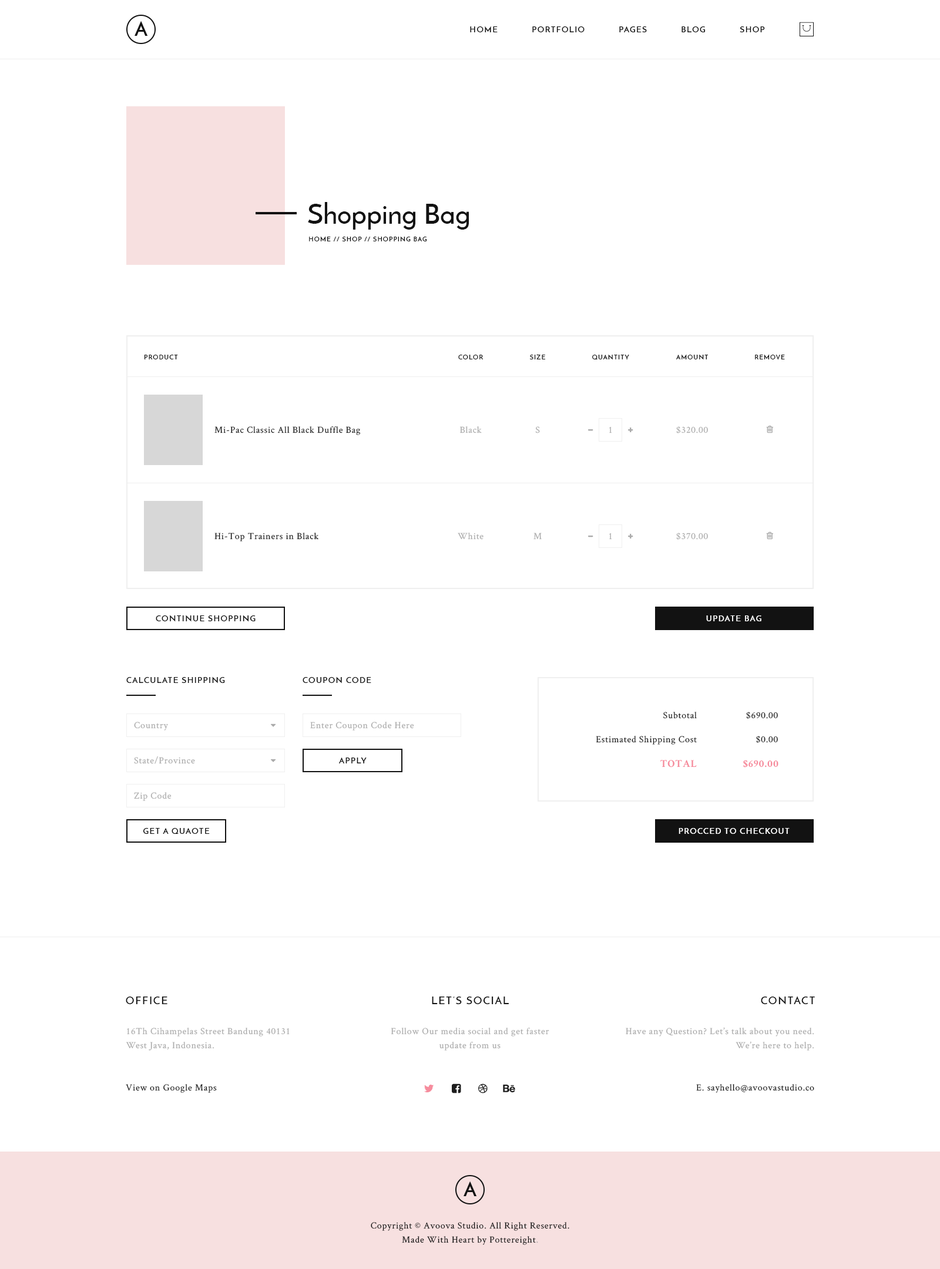
<style>
.page{position:relative;width:940px;height:1269px;background:#ffffff}
.page>*{position:absolute;margin:0}
.t1{font:20px "JosefinSans-Bold";letter-spacing:0.5em;color:#121212;text-transform:uppercase}
.t2{font:8.2px "JosefinSans-SemiBold";letter-spacing:0.1em;color:#121212;text-transform:uppercase}
.t3{font:28.2px "JosefinSans-SemiBold";color:#121212}
.t4{font:6.5px "JosefinSans-SemiBold";letter-spacing:0.1em;color:#121212;text-transform:uppercase}
.t5{font:9.4px "CrimsonText-Roman";letter-spacing:0.05em;color:#121212}
.t6{font:9.4px "CrimsonText-Roman";letter-spacing:0.05em;color:#ababab}
.t7{font:8.2px "JosefinSans-SemiBold";letter-spacing:0.1em;color:#ffffff;text-transform:uppercase}
.t8{font:10.6px "CrimsonText-Bold";letter-spacing:0.05em;color:#f68c9d}
.t9{font:10.6px "JosefinSans-SemiBold";letter-spacing:0.1em;color:#121212;text-transform:uppercase}
.t10{font:9.4px/14.1px "CrimsonText-Roman";letter-spacing:0.05em;color:#ababab}
.t11{font:9.4px/14.1px "CrimsonText-Roman";letter-spacing:0.05em;color:#121212}
</style>
<div class="page">
<p class="t1" style="left:134px;top:21px;width:14px;height:15px">a</p>
<p class="t2" style="left:470px;top:26px;width:27px;height:6px">Home</p>
<p class="t2" style="left:532px;top:26px;width:52px;height:6px">Portfolio</p>
<p class="t2" style="left:619px;top:26px;width:28px;height:6px">Pages</p>
<p class="t2" style="left:681px;top:26px;width:24px;height:6px">Blog</p>
<p class="t2" style="left:739px;top:26px;width:26px;height:6px">Shop</p>
<p class="t3" style="left:308px;top:202px;width:161px;height:28px">Shopping Bag</p>
<p class="t4" style="left:309px;top:236px;width:118px;height:6px">Home // Shop // Shopping Bag</p>
<p class="t4" style="left:144px;top:355px;width:34px;height:4px">Product</p>
<p class="t4" style="left:458px;top:355px;width:25px;height:4px">Color</p>
<p class="t4" style="left:529px;top:354px;width:16px;height:5px">Size</p>
<p class="t4" style="left:592px;top:354px;width:37px;height:6px">Quantity</p>
<p class="t4" style="left:675px;top:354px;width:33px;height:6px">Amount</p>
<p class="t4" style="left:755px;top:354px;width:30px;height:6px">Remove</p>
<p class="t5" style="left:214px;top:426px;width:147px;height:9px">Mi-Pac Classic All Black Duffle Bag</p>
<p class="t6" style="left:459px;top:426px;width:23px;height:7px">Black</p>
<p class="t6" style="left:535px;top:426px;width:5px;height:7px">S</p>
<p class="t6" style="left:609px;top:426px;width:3px;height:7px">1</p>
<p class="t6" style="left:676px;top:426px;width:32px;height:7px">$320.00</p>
<p class="t5" style="left:214px;top:533px;width:105px;height:8px">Hi-Top Trainers in Black</p>
<p class="t6" style="left:457px;top:533px;width:26px;height:7px">White</p>
<p class="t6" style="left:533px;top:533px;width:8px;height:7px">M</p>
<p class="t6" style="left:609px;top:533px;width:3px;height:7px">1</p>
<p class="t6" style="left:676px;top:533px;width:32px;height:7px">$370.00</p>
<p class="t2" style="left:156px;top:615px;width:99px;height:7px">Continue Shopping</p>
<p class="t7" style="left:706px;top:615px;width:55px;height:6px">Update Bag</p>
<p class="t2" style="left:126px;top:677px;width:99px;height:7px">Calculate Shipping</p>
<p class="t2" style="left:302px;top:677px;width:69px;height:7px">Coupon Code</p>
<p class="t5" style="left:663px;top:712px;width:33px;height:7px">Subtotal</p>
<p class="t5" style="left:746px;top:712px;width:32px;height:7px">$690.00</p>
<p class="t6" style="left:134px;top:722px;width:34px;height:9px">Country</p>
<p class="t6" style="left:310px;top:722px;width:104px;height:9px">Enter Coupon Code Here</p>
<p class="t5" style="left:595px;top:736px;width:101px;height:9px">Estimated Shipping Cost</p>
<p class="t5" style="left:756px;top:736px;width:22px;height:7px">$0.00</p>
<p class="t6" style="left:134px;top:756px;width:61px;height:8px">State/Province</p>
<p class="t2" style="left:338px;top:758px;width:28px;height:5px">Apply</p>
<p class="t8" style="left:660px;top:760px;width:36px;height:8px">TOTAL</p>
<p class="t8" style="left:743px;top:760px;width:35px;height:8px">$690.00</p>
<p class="t6" style="left:134px;top:792px;width:37px;height:9px">Zip Code</p>
<p class="t2" style="left:143px;top:828px;width:67px;height:6px">Get a Quaote</p>
<p class="t7" style="left:678px;top:828px;width:111px;height:6px">Procced to Checkout</p>
<p class="t9" style="left:126px;top:997px;width:41px;height:7px">Office</p>
<p class="t9" style="left:432px;top:996px;width:77px;height:8px">Let’s Social</p>
<p class="t9" style="left:761px;top:996px;width:54px;height:9px">Contact</p>
<p class="t10" style="left:126px;top:1028px;width:164px;height:23px">16Th Cihampelas Street Bandung 40131<br>West Java, Indonesia.</p>
<p class="t10" style="left:391px;top:1028px;width:158px;height:23px;text-align:center">Follow Our media social and get faster<br>update from us</p>
<p class="t10" style="left:625px;top:1027px;width:189px;height:24px;text-align:right">Have any Question? Let’s talk about you need.<br>We’re here to help.</p>
<p class="t5" style="left:126px;top:1084px;width:91px;height:9px">View on Google Maps</p>
<p class="t5" style="left:696px;top:1084px;width:118px;height:9px">E. sayhello@avoovastudio.co</p>
<p class="t1" style="left:463px;top:1181px;width:14px;height:15px">a</p>
<p class="t11" style="left:371px;top:1222px;width:198px;height:23px;text-align:center">Copyright © Avoova Studio. All Right Reserved.<br>Made With Heart by Pottereight<span class="t10">.</span></p>
</div>
